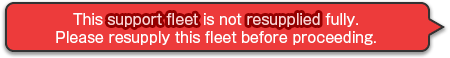
<style>
.page{position:relative;width:450px;height:58px;background:#ed3b3b}
.page>*{position:absolute;margin:0}
.t1{font:14px/18px "GothicMB101Pro-Regular";color:#ffffff}
.t2{font:14px/18px "GothicMB101Pro-Regular";color:#ffd3d3}
</style>
<div class="page">
<p class="t1" style="left:56px;top:13px;width:320px;height:32px;text-align:center">This <span class="t2">support fleet</span> is not <span class="t2">resupplied</span> fully.<br>Please resupply this fleet before proceeding.</p>
<p class="t1" style="left:56px;top:13px;width:320px;height:32px;text-align:center">This <span class="t2">support fleet</span> is not <span class="t2">resupplied</span> fully.<br>Please resupply this fleet before proceeding.</p>
</div>
